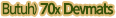
<style>
.page{position:relative;width:116px;height:18px;background:#dfbc76}
.page>*{position:absolute;margin:0}
.t1{font:14px "UDShinGoPro-Bold";letter-spacing:-0.08em;color:#375309;scale:0.9 1}
.t2{font:14px "UDShinGoPro-DeBold";letter-spacing:-0.08em;color:#375309;scale:0.9 1}
.t3{font:12px "UDShinGoPro-DeBold";letter-spacing:-0.08em;color:#375309;scale:0.9 1}
.t4{font:12px "UDShinGoPro-Bold";letter-spacing:-0.08em;color:#375309;scale:0.9 1}
</style>
<div class="page">
<p class="t1" style="left:2px;top:2px;width:112px;height:13px"><span class="t2">Butuh</span><span class="t3">) </span>70<span class="t4">x</span> Devmats</p>
</div>
